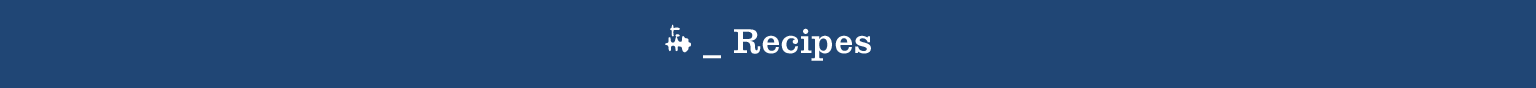
<style>
.page{position:relative;width:1536px;height:88px;background:#204675}
.page>*{position:absolute;margin:0}
.t1{font:36px "Clarendon";letter-spacing:0.02em;color:#ffffff}
.t2{font:36px "Freeform-Two";letter-spacing:0.02em;color:#ffffff}
</style>
<div class="page">
<p class="t1" style="left:665px;top:24px;width:206px;height:37px"><span class="t2">R</span> _ Recipes</p>
</div>
